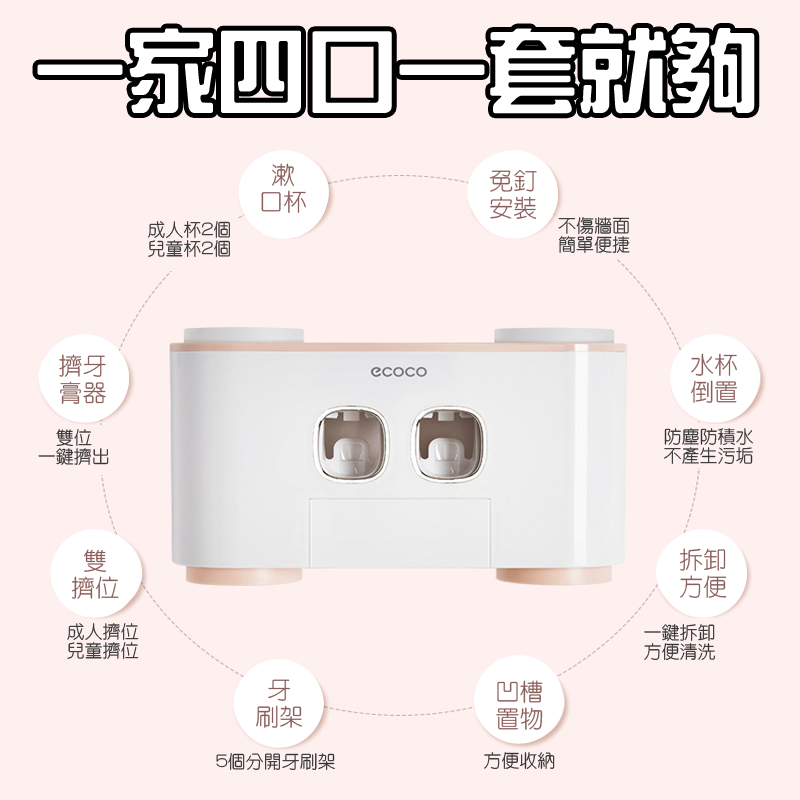
<style>
.page{position:relative;width:800px;height:800px;background:#fef0ef}
.page>*{position:absolute;margin:0}
.t1{font:90.4px "HanWangZonYi";color:#ffffff}
.t2{font:24px "HanWangYenLight";color:#8a5e5a}
.t3{font:18px "HanWangYenLight";color:#333333}
</style>
<div class="page">
<p class="t1" style="left:37px;top:28px;width:718px;height:86px">一家四口一套就夠</p>
<p class="t2" style="left:261px;top:163px;width:45px;height:50px">漱<br>口杯</p>
<p class="t2" style="left:489px;top:169px;width:48px;height:50px">免釘<br>安裝</p>
<p class="t3" style="left:148px;top:221px;width:82px;height:36px">成人杯2個<br>兒童杯2個</p>
<p class="t3" style="left:558px;top:217px;width:72px;height:36px">不傷牆面<br>簡單便捷</p>
<p class="t2" style="left:690px;top:353px;width:48px;height:50px">水杯<br>倒置</p>
<p class="t2" style="left:59px;top:354px;width:47px;height:50px">擠牙<br>膏器</p>
<p class="t3" style="left:38px;top:429px;width:71px;height:36px">雙位<br>一鍵擠出</p>
<p class="t3" style="left:664px;top:428px;width:89px;height:36px">防塵防積水<br>不產生污垢</p>
<p class="t2" style="left:71px;top:549px;width:48px;height:50px">雙<br>擠位</p>
<p class="t2" style="left:679px;top:548px;width:48px;height:50px">拆卸<br>方便</p>
<p class="t3" style="left:67px;top:623px;width:72px;height:36px">成人擠位<br>兒童擠位</p>
<p class="t3" style="left:644px;top:624px;width:71px;height:36px">一鍵拆卸<br>方便清洗</p>
<p class="t2" style="left:256px;top:679px;width:46px;height:49px">牙<br>刷架</p>
<p class="t2" style="left:496px;top:680px;width:47px;height:50px">凹槽<br>置物</p>
<p class="t3" style="left:216px;top:753px;width:119px;height:17px">5個分開牙刷架</p>
<p class="t3" style="left:484px;top:752px;width:71px;height:17px">方便收納</p>
</div>
